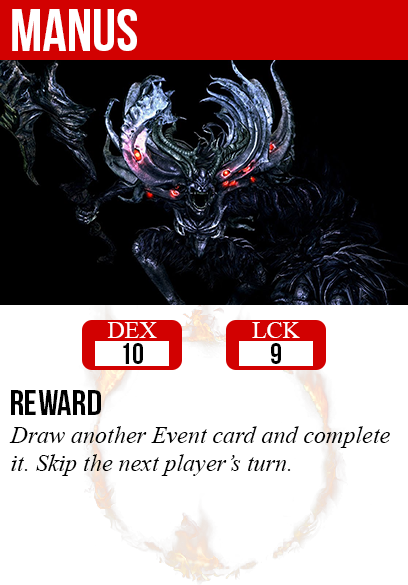
<style>
.page{position:relative;width:408px;height:585px;background:#ffffff}
.page>*{position:absolute;margin:0}
.t1{font:60px "BebasNeue";color:#ffffff}
.t2{font:24px "TimesNewRomanPSMT";color:#ffffff}
.t3{font:30px "BebasNeue";color:#000000}
.t4{font:36px "BebasNeue";color:#000000}
.t5{font:24px "TimesNewRomanPS-ItalicMT";color:#000000}
</style>
<div class="page">
<p class="t1" style="left:12px;top:9px;width:125px;height:42px">manus</p>
<p class="t2" style="left:107px;top:322px;width:50px;height:16px">DEX</p>
<p class="t2" style="left:252px;top:322px;width:48px;height:16px">LCK</p>
<p class="t3" style="left:123px;top:343px;width:20px;height:21px">10</p>
<p class="t3" style="left:271px;top:343px;width:10px;height:21px">9</p>
<p class="t4" style="left:11px;top:390px;width:90px;height:25px">reward</p>
<p class="t5" style="left:9px;top:426px;width:381px;height:50px">Draw another Event card and complete<br>it. Skip the next player’s turn.</p>
</div>
